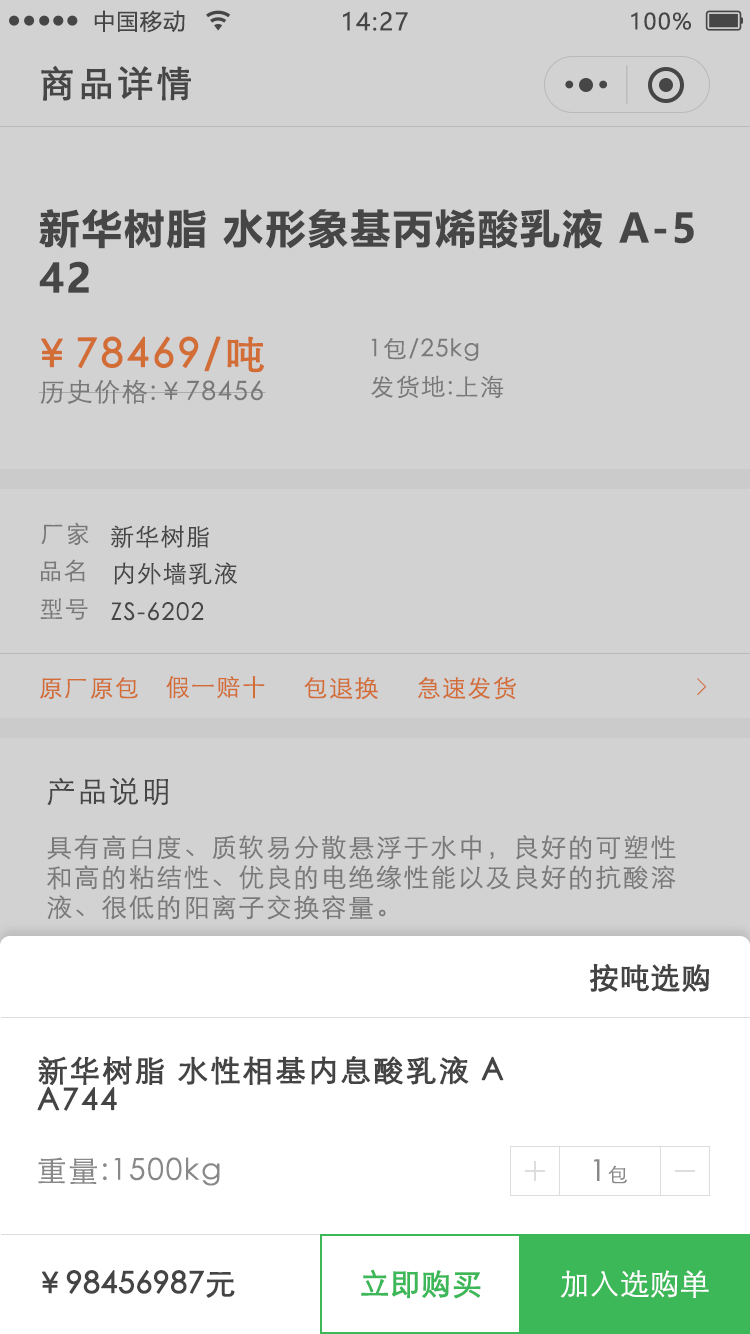
<style>
.page{position:relative;width:750px;height:1334px;background:#d2d2d2}
.page>*{position:absolute;margin:0}
.t1{font:22px "MicrosoftYaHei";letter-spacing:0.06em;color:#444444}
.t2{font:24px "MicrosoftYaHei";letter-spacing:0.06em;color:#444444}
.t3{font:36px "STXihei";letter-spacing:0.06em;color:#444444;font-weight:bold}
.t4{font:40px/50px "MicrosoftYaHei-Bold";letter-spacing:0.06em;color:#444444}
.t5{font:40px "STXihei";letter-spacing:0.06em;color:#d26d36;font-weight:bold}
.t6{font:24px "STXihei";letter-spacing:0.06em;color:#888888}
.t7{font:26px "STXihei";letter-spacing:0.06em;color:#888888}
.t8{font:24px "STXihei";letter-spacing:0.06em;color:#444444}
.t9{font:24px "STXihei";letter-spacing:0.06em;color:#d26d36}
.t10{font:24px "SimSun";letter-spacing:0.06em;color:#d27446}
.t11{font:30px "STXihei";letter-spacing:0.06em;color:#444444}
.t12{font:25.9px/30px "STXihei";letter-spacing:0.06em;color:#888888}
.t13{font:30px "STXihei";color:#444444;font-weight:bold}
.t14{font:30px/30px "STXihei";letter-spacing:0.06em;color:#444444;font-weight:bold}
.t15{font:30px "STXihei";letter-spacing:0.06em;color:#888888}
.t16{font:20px "STXihei";letter-spacing:0.06em;color:#888888}
.t17{font:29.9px "STXihei";color:#3db858;font-weight:bold}
.t18{font:30px "STXihei";color:#ffffff}
</style>
<div class="page">
<p class="t1" style="left:94px;top:10px;width:91px;height:23px">中国移动</p>
<p class="t2" style="left:343px;top:11px;width:65px;height:20px">14:27</p>
<p class="t1" style="left:631px;top:12px;width:60px;height:18px">100%</p>
<p class="t3" style="left:41px;top:65px;width:150px;height:36px">商品详情</p>
<p class="t4" style="left:39px;top:209px;width:655px;height:84px">新华树脂 水形象基丙烯酸乳液 A-5<br>42</p>
<p class="t5" style="left:41px;top:336px;width:223px;height:37px">￥78469/吨</p>
<p class="t6" style="left:371px;top:338px;width:108px;height:23px">1包/25kg</p>
<p class="t6" style="left:371px;top:375px;width:133px;height:24px">发货地:上海</p>
<p class="t7" style="left:38px;top:379px;width:228px;height:25px">历史价格:￥78456</p>
<p class="t6" style="left:41px;top:522px;width:48px;height:23px">厂家</p>
<p class="t8" style="left:111px;top:525px;width:98px;height:23px">新华树脂</p>
<p class="t6" style="left:40px;top:559px;width:45px;height:23px">品名</p>
<p class="t8" style="left:114px;top:562px;width:123px;height:23px">内外墙乳液</p>
<p class="t6" style="left:40px;top:598px;width:48px;height:22px">型号</p>
<p class="t8" style="left:111px;top:602px;width:93px;height:19px">ZS-6202</p>
<p class="t9" style="left:40px;top:677px;width:98px;height:22px">原厂原包</p>
<p class="t9" style="left:166px;top:676px;width:99px;height:23px">假一赔十</p>
<p class="t9" style="left:304px;top:677px;width:74px;height:23px">包退换</p>
<p class="t9" style="left:418px;top:676px;width:98px;height:24px">急速发货</p>
<p class="t10" style="left:697px;top:678px;width:10px;height:18px">&gt;</p>
<p class="t11" style="left:47px;top:777px;width:121px;height:29px">产品说明</p>
<p class="t12" style="left:47px;top:835px;width:629px;height:85px">具有高白度、质软易分散悬浮于水中，良好的可塑性<br>和高的粘结性、优良的电绝缘性能以及良好的抗酸溶<br>液、很低的阳离子交换容量。</p>
<p class="t13" style="left:589px;top:963px;width:120px;height:29px">按吨选购</p>
<p class="t14" style="left:37px;top:1055px;width:467px;height:56px">新华树脂 水性相基内息酸乳液 A<br>A744</p>
<p class="t15" style="left:38px;top:1157px;width:182px;height:29px">重量:1500kg</p>
<p class="t15" style="left:593px;top:1159px;width:34px;height:25px">1<span class="t16">包</span></p>
<p class="t13" style="left:42px;top:1270px;width:193px;height:28px">￥98456987元</p>
<p class="t17" style="left:361px;top:1269px;width:120px;height:30px">立即购买</p>
<p class="t18" style="left:560px;top:1270px;width:149px;height:28px">加入选购单</p>
</div>
